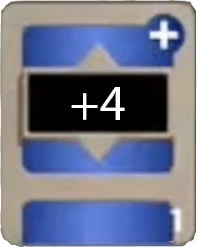
<style>
.page{position:relative;width:197px;height:247px}
.page>*{position:absolute;margin:0}
.t1{font:50px "MyriadPro-Regular";color:#ffffff}
</style>
<div class="page">
<p class="t1" style="left:71px;top:87px;width:54px;height:33px">+4</p>
</div>
